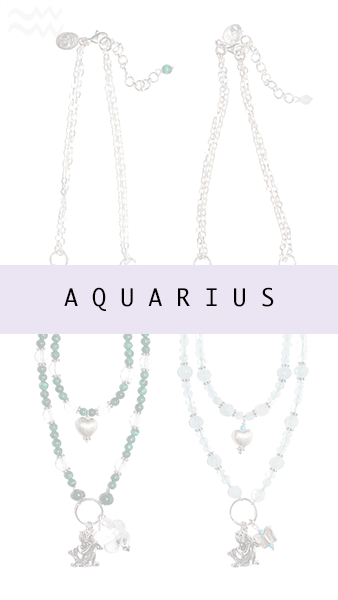
<style>
.page{position:relative;width:338px;height:600px;background:#ffffff}
.page>*{position:absolute;margin:0}
.t1{font:23.5px "Ayuthaya";color:#000000}
</style>
<div class="page">
<p class="t1" style="left:64px;top:287px;width:210px;height:24px">A Q U A R I U S</p>
</div>
